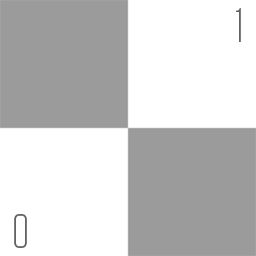
<style>
.page{position:relative;width:256px;height:256px;background:#ffffff}
.page>*{position:absolute;margin:0}
.t1{font:48px "Tungsten-Light";color:#636363}
</style>
<div class="page">
<p class="t1" style="left:236px;top:8px;width:5px;height:34px">1</p>
<p class="t1" style="left:14px;top:214px;width:13px;height:34px">0</p>
</div>
